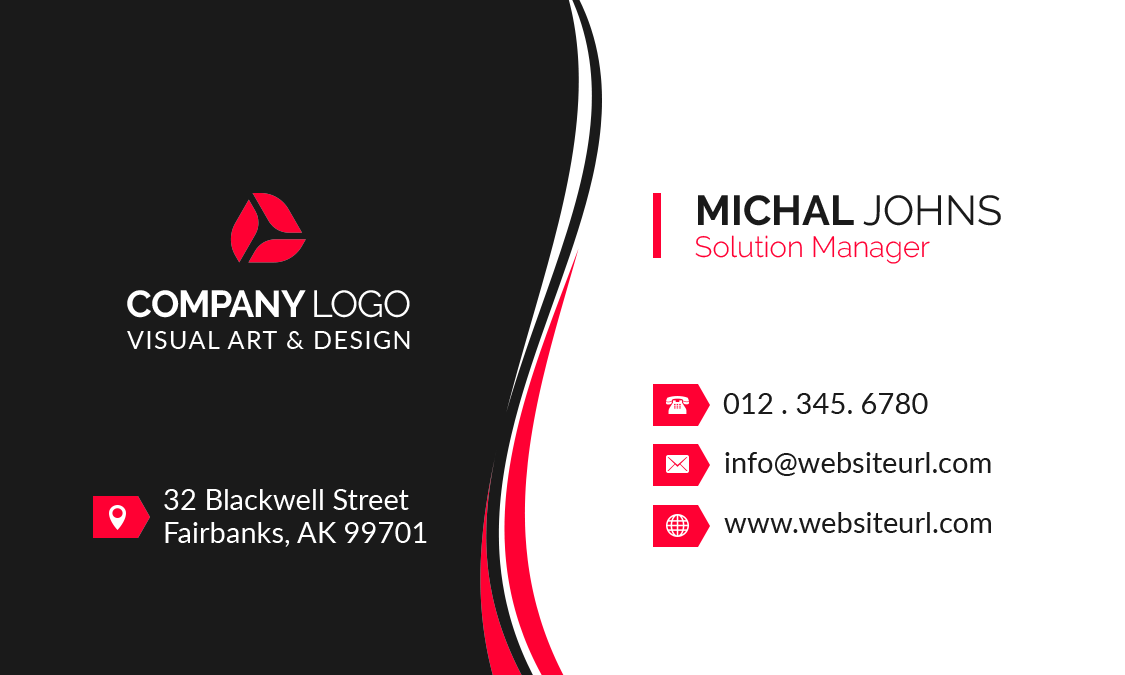
<style>
.page{position:relative;width:1125px;height:675px;background:#ffffff}
.page>*{position:absolute;margin:0}
.t1{font:41.7px "Raleway-Bold";color:#1a1a1a}
.t2{font:41.7px "Raleway-Regular";color:#1a1a1a}
.t3{font:29.2px "Raleway-Light";color:#ff0033}
.t4{font:37.4px "Raleway-Bold";letter-spacing:-0.03em;color:#ffffff;text-transform:uppercase}
.t5{font:37.4px "Raleway-Regular";letter-spacing:-0.03em;color:#ffffff;text-transform:uppercase}
.t6{font:25px "Lato-Regular";letter-spacing:0.06em;color:#ffffff}
.t7{font:29.2px "Lato-Regular";color:#1a1a1a}
.t8{font:29.2px/33.3px "Lato-Regular";color:#ffffff}
</style>
<div class="page">
<p class="t1" style="left:698px;top:195px;width:303px;height:31px">MICHAL <span class="t2">JOHNS</span></p>
<p class="t3" style="left:695px;top:235px;width:235px;height:29px">Solution Manager</p>
<p class="t4" style="left:127px;top:290px;width:283px;height:28px">COMPANY <span class="t5">LOGO</span></p>
<p class="t6" style="left:127px;top:331px;width:283px;height:18px">VISUAL ART &amp; DESIGN</p>
<p class="t7" style="left:723px;top:393px;width:205px;height:21px">012 . 345. 6780</p>
<p class="t7" style="left:725px;top:452px;width:266px;height:24px">info@websiteurl.com</p>
<p class="t8" style="left:164px;top:489px;width:263px;height:58px">32 Blackwell Street<br>Fairbanks, AK 99701</p>
<p class="t7" style="left:724px;top:512px;width:267px;height:21px">www.websiteurl.com</p>
</div>
